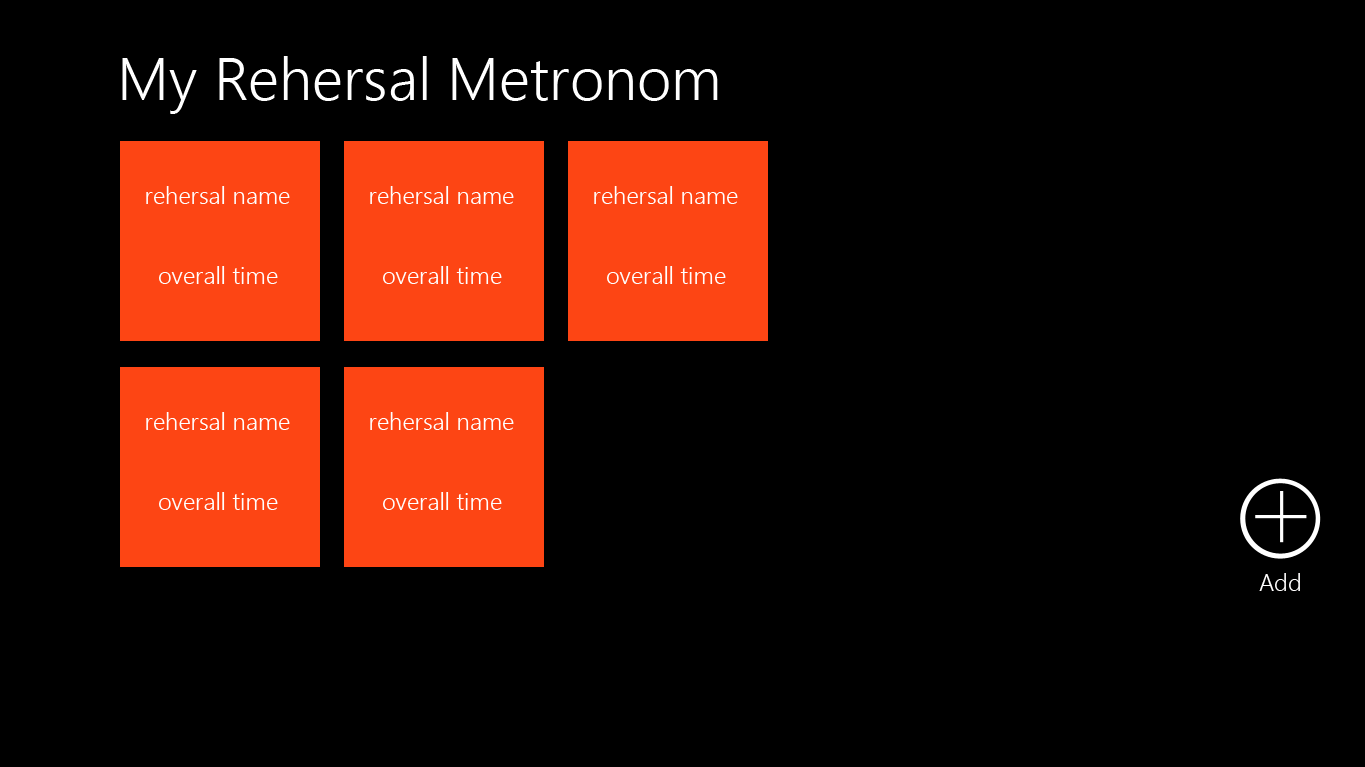
<style>
.page{position:relative;width:1365px;height:767px;background:#000000}
.page>*{position:absolute;margin:0}
.t1{font:60px "SegoeUI-Semilight";color:#ffffff}
.t2{font:24px "SegoeUI-Semilight";color:#ffffff}
.t3{font:24px "SegoeUI-Semilight";color:#fffefe}
</style>
<div class="page">
<p class="t1" style="left:122px;top:56px;width:596px;height:58px">My Rehersal Metronom</p>
<p class="t2" style="left:146px;top:186px;width:144px;height:18px">rehersal name</p>
<p class="t2" style="left:370px;top:186px;width:144px;height:18px">rehersal name</p>
<p class="t2" style="left:594px;top:186px;width:144px;height:18px">rehersal name</p>
<p class="t2" style="left:159px;top:266px;width:119px;height:18px">overall time</p>
<p class="t2" style="left:383px;top:266px;width:119px;height:18px">overall time</p>
<p class="t2" style="left:607px;top:266px;width:119px;height:18px">overall time</p>
<p class="t2" style="left:146px;top:412px;width:144px;height:18px">rehersal name</p>
<p class="t2" style="left:370px;top:412px;width:144px;height:18px">rehersal name</p>
<p class="t2" style="left:159px;top:492px;width:119px;height:18px">overall time</p>
<p class="t2" style="left:383px;top:492px;width:119px;height:18px">overall time</p>
<p class="t3" style="left:1259px;top:573px;width:41px;height:18px">Add</p>
</div>
